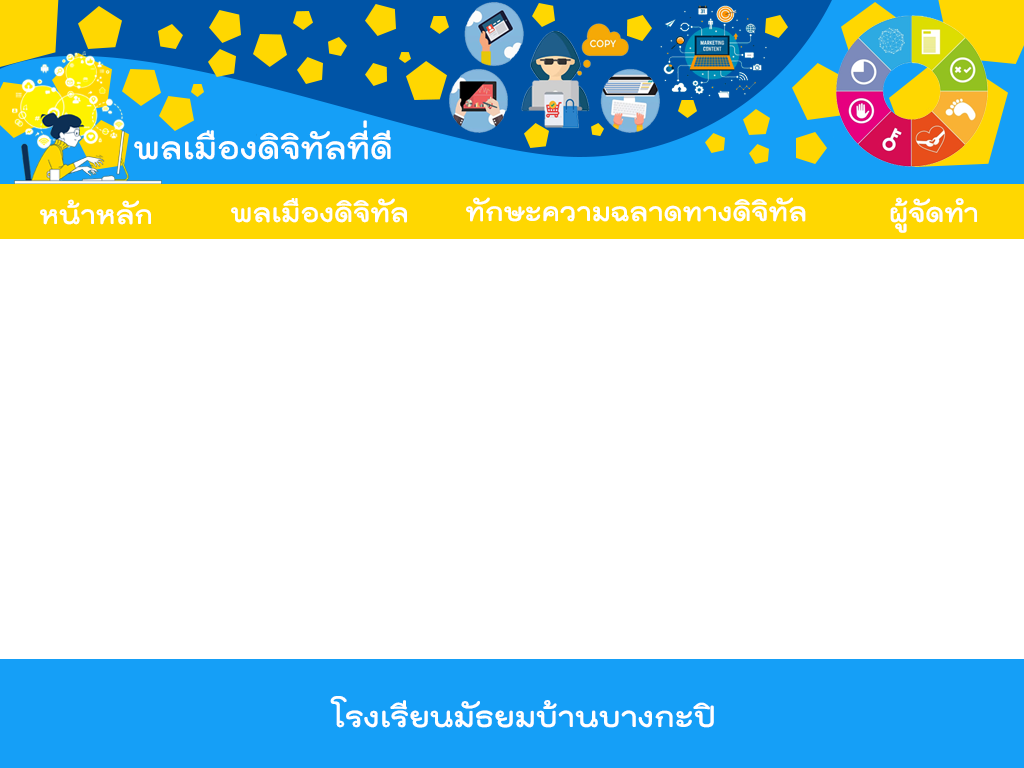
<style>
.page{position:relative;width:1024px;height:768px;background:#ffffff}
.page>*{position:absolute;margin:0}
.t1{font:43px "THKodchasal-Bold";color:#ffffff}
.t2{font:36px "THKodchasal-Bold";color:#ffffff}
.t3{font:40px "THKodchasal-Bold";color:#ffffff}
</style>
<div class="page">
<p class="t1" style="left:134px;top:120px;width:257px;height:40px">พลเมืองดิจิทัลที่ดี</p>
<p class="t2" style="left:231px;top:198px;width:176px;height:25px">พลเมืองดิจิทัล</p>
<p class="t2" style="left:466px;top:197px;width:340px;height:25px">ทักษะความฉลาดทางดิจิทัล</p>
<p class="t2" style="left:890px;top:197px;width:87px;height:36px">ผู้จัดทำ</p>
<p class="t2" style="left:40px;top:199px;width:111px;height:26px">หน้าหลัก</p>
<p class="t3" style="left:330px;top:696px;width:384px;height:32px">โรงเรียนมัธยมบ้านบางกะปิ</p>
</div>
